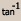
<style>
.page{position:relative;width:21px;height:21px;background:#d9cdc1}
.page>*{position:absolute;margin:0}
.t1{font:9px "Tahoma";color:#000000}
</style>
<div class="page">
<p class="t1" style="left:12px;top:2px;width:8px;height:7px">-1</p>
<p class="t1" style="left:2px;top:8px;width:13px;height:8px">tan</p>
</div>
